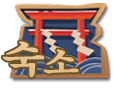
<style>
.page{position:relative;width:115px;height:89px;background:#ffffff}
.page>*{position:absolute;margin:0}
.t1{font:39px "MJemokBatang";letter-spacing:-0.08em;color:#e7c18f;font-weight:bold;scale:1.12 1}
.t2{font:32.9px "MJemokBatang";letter-spacing:-0.08em;color:#e7c18f;font-weight:bold;scale:1.12 1}
</style>
<div class="page">
<p class="t1" style="left:2px;top:41px;width:77px;height:37px">숙<span class="t2">소</span></p>
</div>
